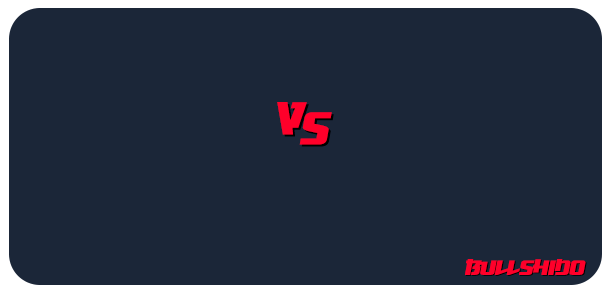
<style>
.page{position:relative;width:612px;height:293px;background:#1b2638}
.page>*{position:absolute;margin:0}
.t1{font:60px "Osaka-SansSerif";letter-spacing:-0.05em;color:#ff002a;scale:0.89 1}
.t2{font:26.5px "Osaka-SansSerif";letter-spacing:-0.05em;color:#ff002a}
</style>
<div class="page">
<p class="t1" style="left:277px;top:102px;width:30px;height:33px">v</p>
<p class="t1" style="left:279px;top:104px;width:30px;height:33px">v</p>
<p class="t1" style="left:299px;top:112px;width:33px;height:33px">s</p>
<p class="t1" style="left:301px;top:114px;width:33px;height:33px">s</p>
<p class="t2" style="left:465px;top:259px;width:121px;height:16px">bullshido</p>
<p class="t2" style="left:466px;top:259px;width:121px;height:17px">bullshido</p>
</div>
